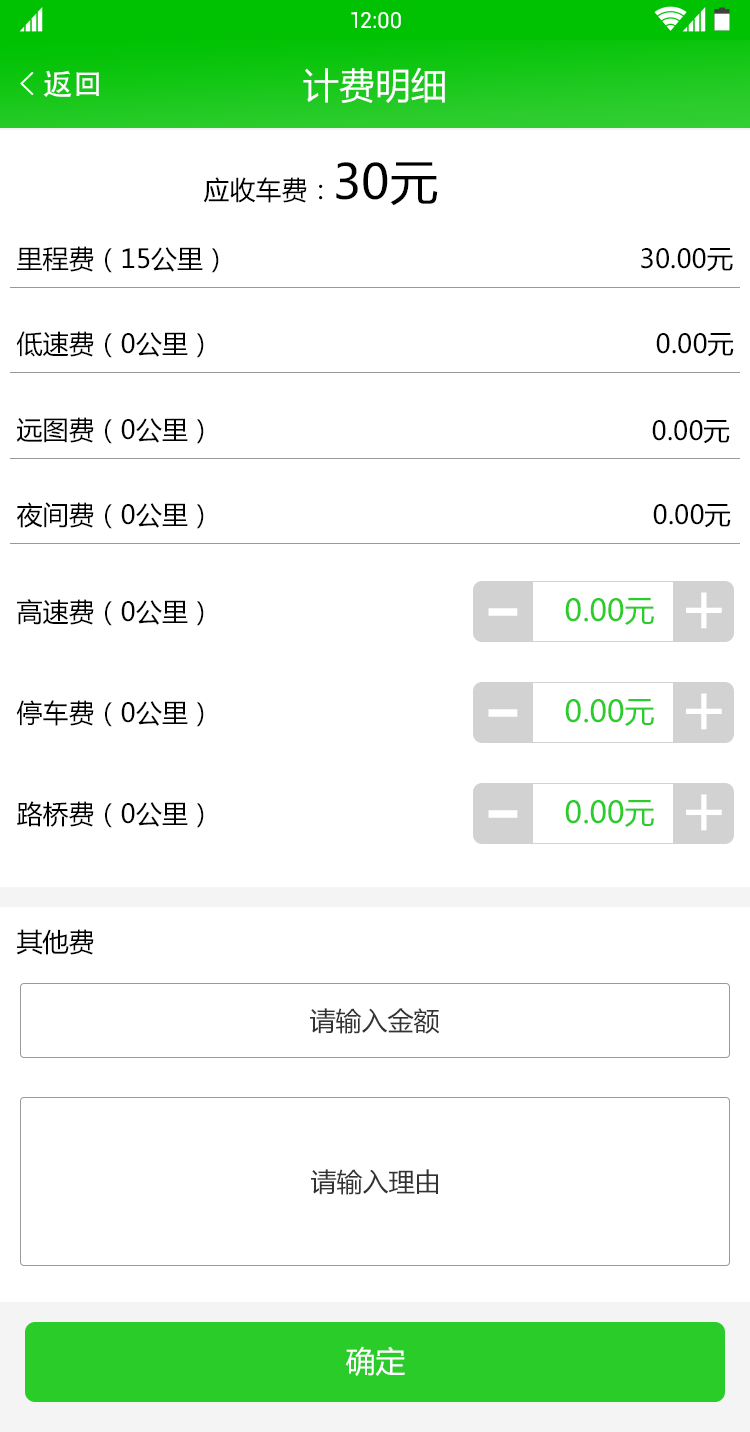
<style>
.page{position:relative;width:750px;height:1432px;background:#ffffff}
.page>*{position:absolute;margin:0}
.t1{font:22px "Roboto-Regular";color:#ffffff}
.t2{font:30px "AdobeHeitiStd-Regular";color:#ffffff}
.t3{font:36px "MicrosoftYaHei";color:#ffffff}
.t4{font:26px "MicrosoftYaHei";color:#000000}
.t5{font:48px "MicrosoftYaHei";color:#000000}
.t6{font:72px "MicrosoftYaHei";color:#ffffff}
.t7{font:30px "MicrosoftYaHei";color:#2ccc2c}
.t8{font:100px "MicrosoftYaHei";color:#ffffff}
.t9{font:26px "MicrosoftYaHei";color:#333333}
.t10{font:30px "MicrosoftYaHei";color:#ffffff}
</style>
<div class="page">
<p class="t1" style="left:351px;top:12px;width:50px;height:17px">12:00</p>
<p class="t2" style="left:43px;top:70px;width:56px;height:27px">返回</p>
<p class="t3" style="left:303px;top:67px;width:142px;height:36px">计费明细</p>
<p class="t4" style="left:203px;top:162px;width:235px;height:44px">应收车费：<span class="t5">30元</span></p>
<p class="t4" style="left:17px;top:246px;width:202px;height:27px">里程费（15公里）</p>
<p class="t4" style="left:641px;top:248px;width:92px;height:24px">30.00元</p>
<p class="t4" style="left:16px;top:331px;width:188px;height:27px">低速费（0公里）</p>
<p class="t4" style="left:656px;top:333px;width:78px;height:24px">0.00元</p>
<p class="t4" style="left:16px;top:417px;width:188px;height:27px">远图费（0公里）</p>
<p class="t4" style="left:652px;top:420px;width:78px;height:24px">0.00元</p>
<p class="t4" style="left:17px;top:502px;width:187px;height:27px">夜间费（0公里）</p>
<p class="t4" style="left:653px;top:504px;width:78px;height:24px">0.00元</p>
<p class="t6" style="left:686px;top:592px;width:36px;height:37px">+</p>
<p class="t4" style="left:17px;top:599px;width:187px;height:27px">高速费（0公里）</p>
<p class="t7" style="left:565px;top:598px;width:89px;height:27px">0.00元</p>
<p class="t8" style="left:488px;top:608px;width:30px;height:8px">-</p>
<p class="t4" style="left:16px;top:700px;width:188px;height:27px">停车费（0公里）</p>
<p class="t7" style="left:565px;top:699px;width:89px;height:27px">0.00元</p>
<p class="t6" style="left:686px;top:693px;width:36px;height:37px">+</p>
<p class="t8" style="left:488px;top:709px;width:30px;height:8px">-</p>
<p class="t6" style="left:686px;top:794px;width:36px;height:37px">+</p>
<p class="t4" style="left:17px;top:801px;width:187px;height:27px">路桥费（0公里）</p>
<p class="t7" style="left:565px;top:800px;width:89px;height:27px">0.00元</p>
<p class="t8" style="left:488px;top:810px;width:30px;height:8px">-</p>
<p class="t4" style="left:16px;top:929px;width:78px;height:26px">其他费</p>
<p class="t9" style="left:310px;top:1008px;width:130px;height:26px">请输入金额</p>
<p class="t9" style="left:311px;top:1169px;width:127px;height:26px">请输入理由</p>
<p class="t10" style="left:345px;top:1346px;width:60px;height:30px">确定</p>
</div>
